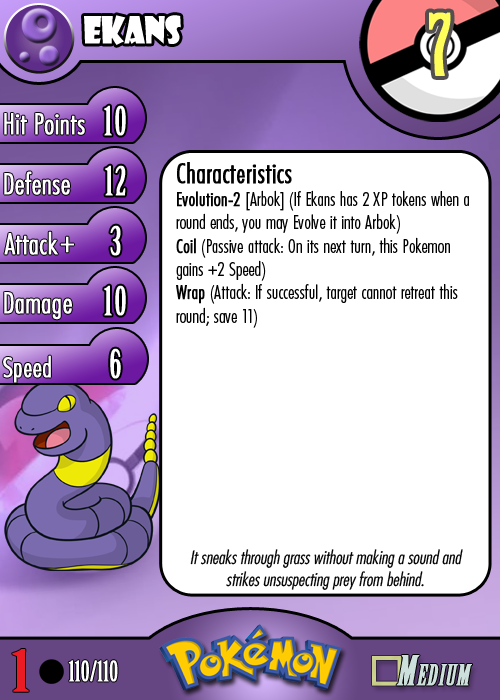
<style>
.page{position:relative;width:500px;height:700px;background:#ffffff}
.page>*{position:absolute;margin:0}
.t1{font:36.7px "ShowcardGothic-Reg";letter-spacing:-0.025em;color:#ffffff;scale:0.91 1}
.t2{font:83.3px "BirchStd";letter-spacing:0.025em;color:#fffd59;font-weight:bold}
.t3{font:27.8px "Futura-CondensedLight";color:#ffffff;font-weight:bold}
.t4{font:38.9px "BirchStd";letter-spacing:0.035em;color:#ffffff;font-weight:bold}
.t5{font:19.4px "FuturaCondensedBQ-Light";color:#010101}
.t6{font:27.8px "FuturaCondensedBQ-Light";color:#010101;font-weight:bold}
.t7{font:19.4px "FuturaCondensedBQ-Light";color:#010101;font-weight:bold}
.t8{font:30.6px "Futura-CondensedLight";color:#ffffff;font-weight:bold}
.t9{font:27.8px "FuturaCondensedBQ-Light";color:#ffffff;font-weight:bold}
.t10{font:18.1px "Futura-CondensedLight";color:#010101;font-style:italic}
.t11{font:55.6px "BirchStd";color:#ed1c24;font-weight:bold;scale:1.5 1}
.t12{font:27.8px "BirchStd";color:#ffffff;font-weight:bold}
</style>
<div class="page">
<p class="t1" style="left:84px;top:15px;width:97px;height:30px">ekans</p>
<p class="t2" style="left:429px;top:12px;width:22px;height:64px">7</p>
<p class="t3" style="left:4px;top:113px;width:81px;height:22px">Hit Points</p>
<p class="t4" style="left:104px;top:105px;width:22px;height:31px">10</p>
<p class="t3" style="left:4px;top:171px;width:66px;height:24px">Defense</p>
<p class="t4" style="left:105px;top:165px;width:21px;height:31px">12</p>
<p class="t5" style="left:176px;top:162px;width:293px;height:166px"><span class="t6">Characteristics<br></span><span class="t7">Evolution-2 </span>[Arbok] (If Ekans has 2 XP tokens when a round ends, you may Evolve it into Arbok)<br><span class="t7">Coil</span> (Passive attack: On its next turn, this Pokemon gains +2 Speed)<br><span class="t7">Wrap</span> (Attack: If successful, target cannot retreat this round; save 11)</p>
<p class="t3" style="left:4px;top:231px;width:54px;height:24px">Attack</p>
<p class="t4" style="left:110px;top:225px;width:11px;height:31px">3</p>
<p class="t8" style="left:60px;top:236px;width:14px;height:17px">+</p>
<p class="t3" style="left:4px;top:292px;width:68px;height:28px">Damage</p>
<p class="t4" style="left:104px;top:285px;width:22px;height:31px">10</p>
<p class="t4" style="left:110px;top:348px;width:11px;height:31px">6</p>
<p class="t9" style="left:3px;top:355px;width:48px;height:28px">Speed</p>
<p class="t10" style="left:190px;top:549px;width:273px;height:41px;text-align:center">It sneaks through grass without making a sound and strikes unsuspecting prey from behind.</p>
<p class="t11" style="left:12px;top:649px;width:17px;height:43px">1</p>
<p class="t12" style="left:68px;top:660px;width:50px;height:22px">110/110</p>
</div>
